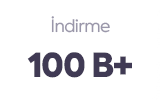
<style>
.page{position:relative;width:160px;height:100px;background:#ffffff}
.page>*{position:absolute;margin:0}
.t1{font:17.1px "Axiforma-Book";letter-spacing:-0.04em;color:#9a97aa}
.t2{font:32.9px "Axiforma-Black";letter-spacing:-0.04em;color:#403a54}
</style>
<div class="page">
<p class="t1" style="left:51px;top:16px;width:59px;height:17px">İndirme</p>
<p class="t2" style="left:27px;top:52px;width:105px;height:26px">100 B+</p>
</div>
